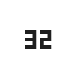
<style>
.page{position:relative;width:74px;height:74px;background:#ffffff}
.page>*{position:absolute;margin:0}
.t1{font:30px "04b24";color:#1f1f1f}
</style>
<div class="page">
<p class="t1" style="left:25px;top:30px;width:27px;height:19px">32</p>
</div>
